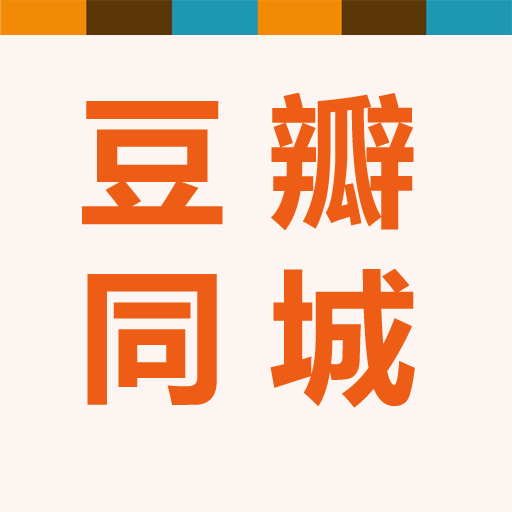
<style>
.page{position:relative;width:512px;height:512px;background:#fcf5f1}
.page>*{position:absolute;margin:0}
.t1{font:142.1px "MicrosoftYaHei-Bold";color:#ee5d15;scale:1.03 1}
</style>
<div class="page">
<p class="t1" style="left:82px;top:92px;width:332px;height:139px">豆 瓣</p>
<p class="t1" style="left:87px;top:268px;width:328px;height:140px">同 城</p>
</div>
